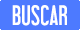
<style>
.page{position:relative;width:80px;height:30px;background:#4d7aff}
.page>*{position:absolute;margin:0}
.t1{font:25px "LibelSuit-Regular";letter-spacing:0.01em;color:#ffffff}
</style>
<div class="page">
<p class="t1" style="left:12px;top:5px;width:55px;height:21px">BUSCAR</p>
</div>
